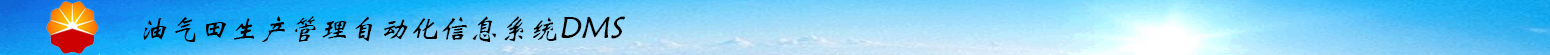
<style>
.page{position:relative;width:1550px;height:55px}
.page>*{position:absolute;margin:0}
.t1{font:30px "STXinwei";color:#000000;font-style:italic}
</style>
<div class="page">
<p class="t1" style="left:143px;top:16px;width:482px;height:26px">油气田生产管理自动化信息系统DMS</p>
</div>
